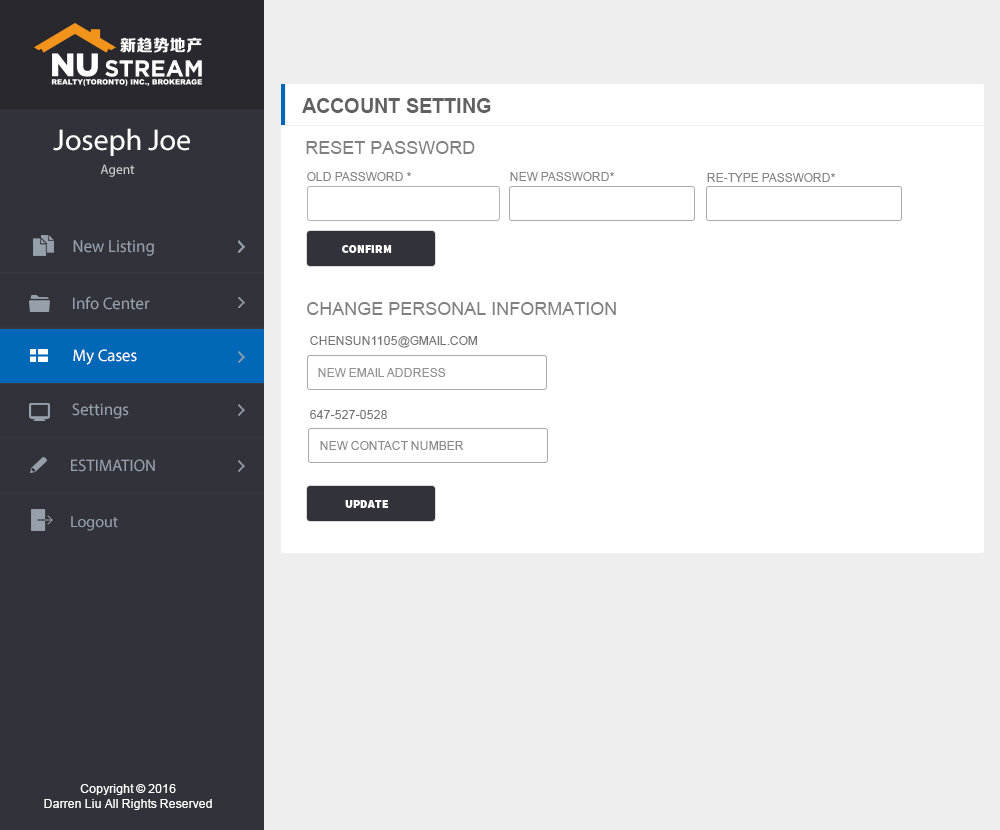
<style>
.page{position:relative;width:1000px;height:830px;background:#ffffff}
.page>*{position:absolute;margin:0}
.t1{font:20px "Arial-BoldMT";color:#616161}
.t2{font:30px "MyriadPro-Regular";color:#ffffff}
.t3{font:18px "ArialMT";color:#808080}
.t4{font:13.4px "MyriadPro-Regular";color:#cccccc}
.t5{font:12px "ArialMT";color:#868686}
.t6{font:12px "ArialMT";color:#878787}
.t7{font:12px "ArialMT";color:#858585}
.t8{font:17.6px "MyriadPro-Regular";color:#95a0aa;scale:0.96 1}
.t9{font:12px "SourceSansPro-Black";color:#ffffff}
.t10{font:16.8px "MyriadPro-Regular";color:#95a0aa}
.t11{font:12px "ArialMT";color:#747474}
.t12{font:16.8px "MyriadPro-Regular";color:#ffffff}
.t13{font:12px "ArialMT";color:#909090}
.t14{font:12px "ArialMT";color:#8a8a8a}
.t15{font:16px "MyriadPro-Regular";color:#95a0aa}
.t16{font:12px "ArialMT";color:#ffffff}
</style>
<div class="page">
<p class="t1" style="left:302px;top:98px;width:189px;height:15px">ACCOUNT SETTING</p>
<p class="t2" style="left:53px;top:128px;width:137px;height:28px">Joseph Joe</p>
<p class="t3" style="left:306px;top:141px;width:169px;height:13px">RESET PASSWORD</p>
<p class="t4" style="left:100px;top:164px;width:35px;height:13px">Agent</p>
<p class="t5" style="left:307px;top:172px;width:104px;height:9px">OLD PASSWORD *</p>
<p class="t6" style="left:510px;top:172px;width:104px;height:9px">NEW PASSWORD*</p>
<p class="t7" style="left:707px;top:173px;width:128px;height:9px">RE-TYPE PASSWORD*</p>
<p class="t8" style="left:73px;top:240px;width:81px;height:16px">New Listing</p>
<p class="t9" style="left:342px;top:245px;width:50px;height:8px">CONFIRM</p>
<p class="t10" style="left:73px;top:296px;width:77px;height:14px">Info Center</p>
<p class="t3" style="left:307px;top:302px;width:309px;height:13px">CHANGE PERSONAL INFORMATION</p>
<p class="t11" style="left:310px;top:336px;width:167px;height:12px">CHENSUN1105@GMAIL.COM</p>
<p class="t12" style="left:73px;top:349px;width:64px;height:16px">My Cases</p>
<p class="t13" style="left:318px;top:368px;width:128px;height:9px">NEW EMAIL ADDRESS</p>
<p class="t10" style="left:72px;top:403px;width:57px;height:16px">Settings</p>
<p class="t11" style="left:310px;top:410px;width:77px;height:9px">647-527-0528</p>
<p class="t14" style="left:320px;top:441px;width:144px;height:9px">NEW CONTACT NUMBER</p>
<p class="t10" style="left:71px;top:459px;width:84px;height:13px">ESTIMATION</p>
<p class="t9" style="left:345px;top:500px;width:44px;height:8px">UPDATE</p>
<p class="t15" style="left:71px;top:516px;width:47px;height:15px">Logout</p>
<p class="t16" style="left:44px;top:784px;width:168px;height:26px;text-align:center">Copyright © 2016<br>Darren Liu All Rights Reserved</p>
</div>
